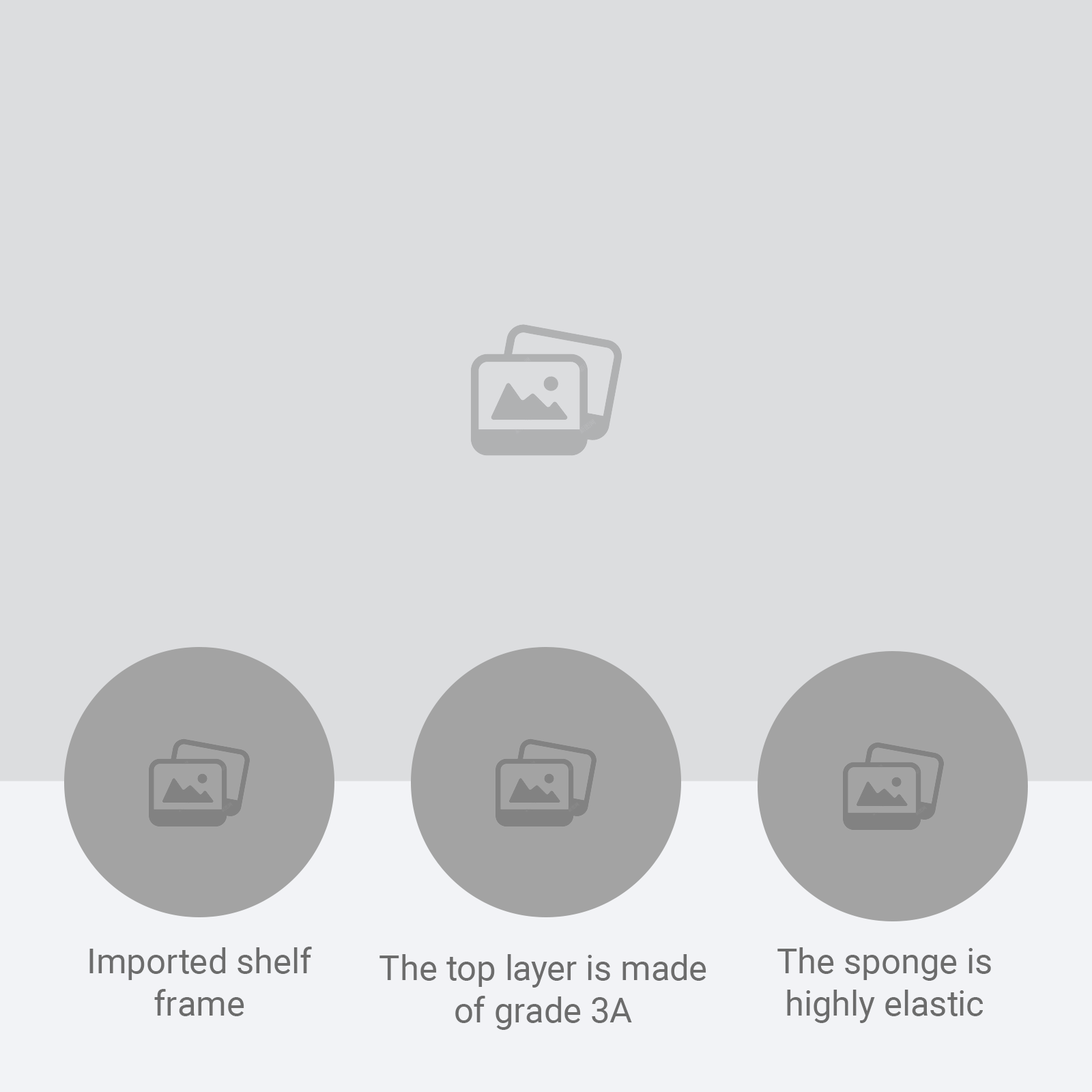
<style>
.page{position:relative;width:1092px;height:1092px;background:#dcdddf}
.page>*{position:absolute;margin:0}
.t1{font:34.9px "Roboto-Regular";color:#6c6c6c}
</style>
<div class="page">
<p class="t1" style="left:89px;top:947px;width:223px;height:69px;text-align:center">Imported shelf frame</p>
<p class="t1" style="left:777px;top:947px;width:214px;height:76px;text-align:center">The sponge is highly elastic</p>
<p class="t1" style="left:379px;top:954px;width:327px;height:76px;text-align:center">The top layer is made of grade 3A</p>
</div>
